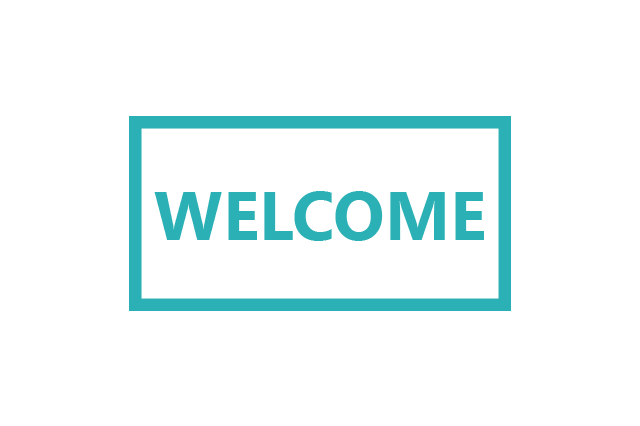
<style>
.page{position:relative;width:640px;height:426px;background:#ffffff}
.page>*{position:absolute;margin:0}
.t1{font:67.8px "SegoeUI-Bold";color:#2bb0b5}
</style>
<div class="page">
<p class="t1" style="left:154px;top:191px;width:330px;height:50px">WELCOME</p>
</div>
